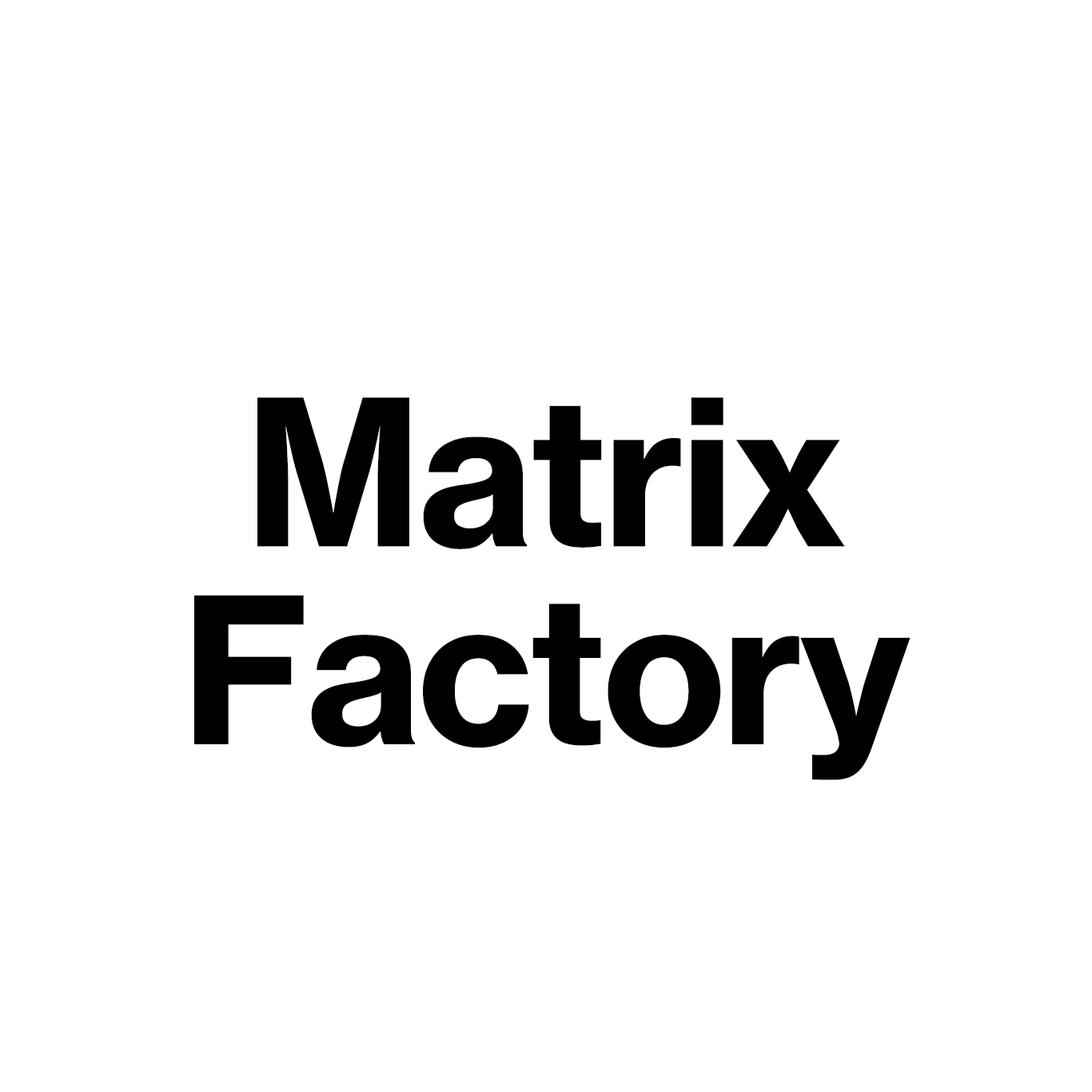
<style>
.page{position:relative;width:1092px;height:1092px;background:#ffffff}
.page>*{position:absolute;margin:0}
.t1{font:199.9px/198px "NHaasGroteskTXPro-75Bd";letter-spacing:-0.02em;color:#000000}
</style>
<div class="page">
<p class="t1" style="left:194px;top:397px;width:717px;height:383px;text-align:center">Matrix<br>Factory</p>
</div>
